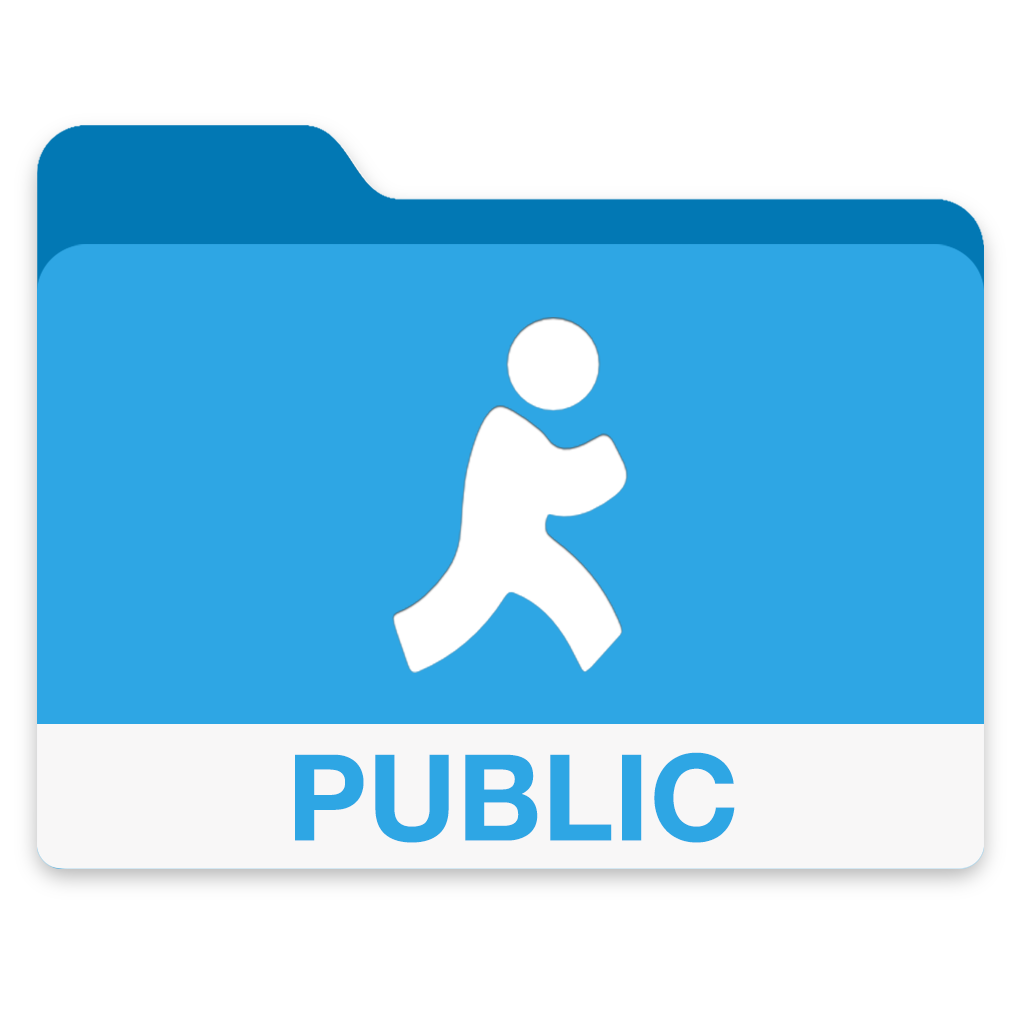
<style>
.page{position:relative;width:1024px;height:1024px;background:#2ea6e4}
.page>*{position:absolute;margin:0}
.t1{font:120px "HelveticaNeue-Bold";letter-spacing:0.005em;color:#2ea6e4}
</style>
<div class="page">
<p class="t1" style="left:295px;top:752px;width:440px;height:91px">PUBLIC</p>
</div>
